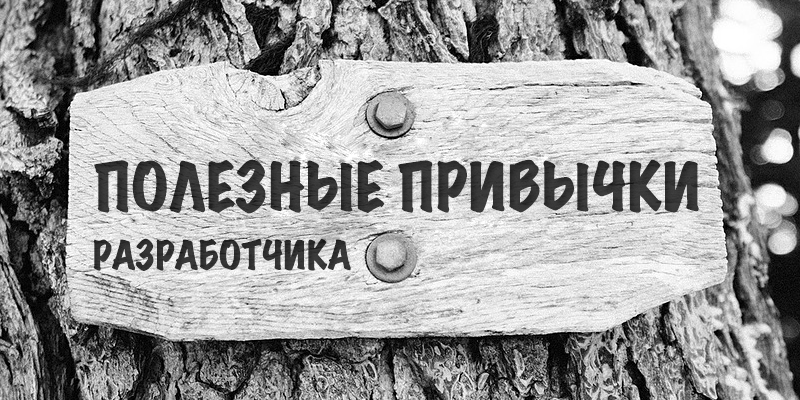
<style>
.page{position:relative;width:800px;height:400px}
.page>*{position:absolute;margin:0}
.t1{font:60px "MarkerFelt-Wide";color:#202020;text-transform:uppercase}
.t2{font:36px "MarkerFelt-Wide";color:#202020;text-transform:uppercase}
</style>
<div class="page">
<p class="t1" style="left:94px;top:159px;width:605px;height:55px;opacity:0.92">Полезные привычки</p>
<p class="t2" style="left:93px;top:238px;width:258px;height:33px;opacity:0.92">Разработчика</p>
</div>
